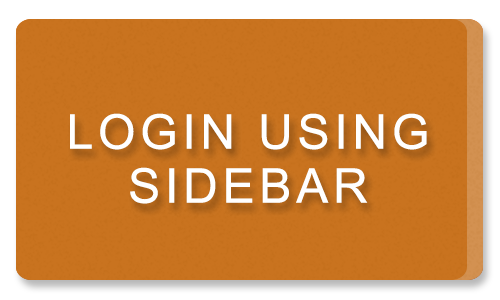
<style>
.page{position:relative;width:500px;height:300px;background:#c9731f}
.page>*{position:absolute;margin:0}
.t1{font:48px/54px "ArialMT";letter-spacing:0.1em;color:#ffffff;text-transform:uppercase}
</style>
<div class="page">
<p class="t1" style="left:70px;top:113px;width:357px;height:91px;text-align:center">Login using<br>sidebar</p>
</div>
